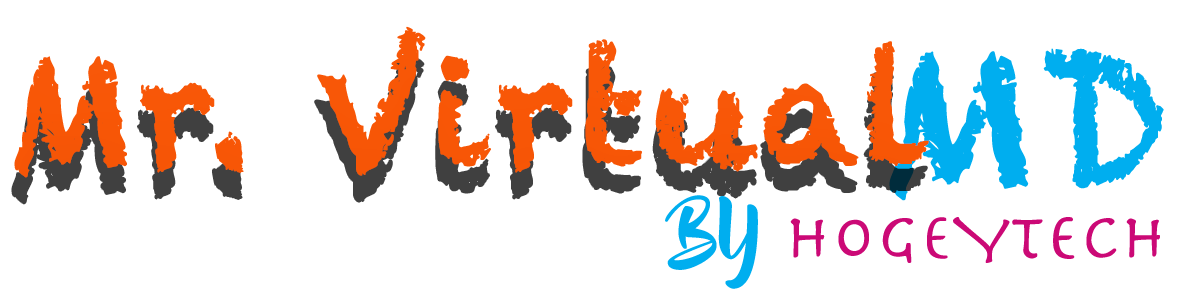
<style>
.page{position:relative;width:1200px;height:293px;background:#ffffff}
.page>*{position:absolute;margin:0}
.t1{font:151px "Chalkduster";color:#f85606;font-weight:bold}
.t2{font:186px "Chalkduster";color:#00aeef;font-weight:bold}
.t3{font:66px "Herculanum";color:#cb0976;font-weight:bold}
.t4{font:66px "BeyondTheMountains";color:#00aeef;font-weight:bold}
</style>
<div class="page">
<p class="t1" style="left:14px;top:26px;width:915px;height:152px">Mr. Virtual</p>
<p class="t2" style="left:889px;top:48px;width:275px;height:153px">MD</p>
<p class="t3" style="left:665px;top:195px;width:495px;height:94px"><span class="t4">BY </span>HOGEYTECH</p>
</div>
